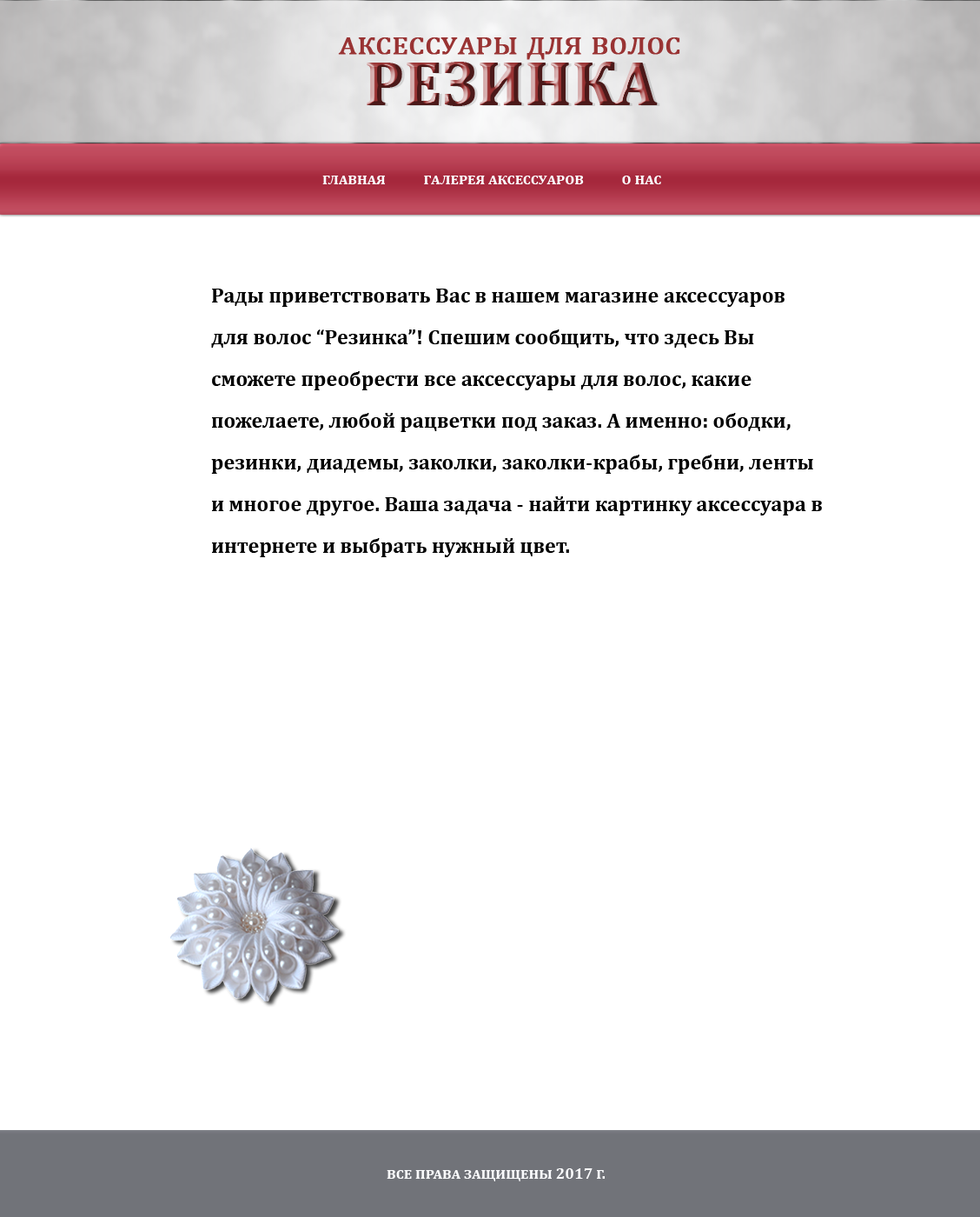
<style>
.page{position:relative;width:980px;height:1217px;background:#ffffff}
.page>*{position:absolute;margin:0}
.t1{font:31.3px "Cambria";color:#993333;font-variant:small-caps;font-weight:bold}
.t2{font:62.6px "Cambria-Bold";font-variant:small-caps;font-weight:bold}
.t3{font:15.6px "Cambria-Bold";color:#fafbfd;font-variant:small-caps}
.t4{font:20.9px/41.7px "Cambria-Bold";letter-spacing:0.005em;color:#000000}
</style>
<div class="page">
<p class="t1" style="left:338px;top:37px;width:342px;height:23px">аксессуары для волос</p>
<p class="t2" style="left:367px;top:62px;width:291px;height:44px">РЕЗИНКА</p>
<p class="t3" style="left:322px;top:176px;width:339px;height:8px">главная           галерея аксессуаров           о нас</p>
<p class="t4" style="left:211px;top:288px;width:611px;height:269px">Рады приветствовать Вас в нашем магазине аксессуаров для волос “Резинка”! Спешим сообщить, что здесь Вы сможете преобрести все аксессуары для волос, какие пожелаете, любой рацветки под заказ. А именно: ободки, резинки, диадемы, заколки, заколки-крабы, гребни, ленты и многое другое. Ваша задача - найти картинку аксессуара в интернете и выбрать нужный цвет.</p>
<p class="t3" style="left:387px;top:1168px;width:218px;height:13px">все права защищены 2017 г.</p>
</div>
